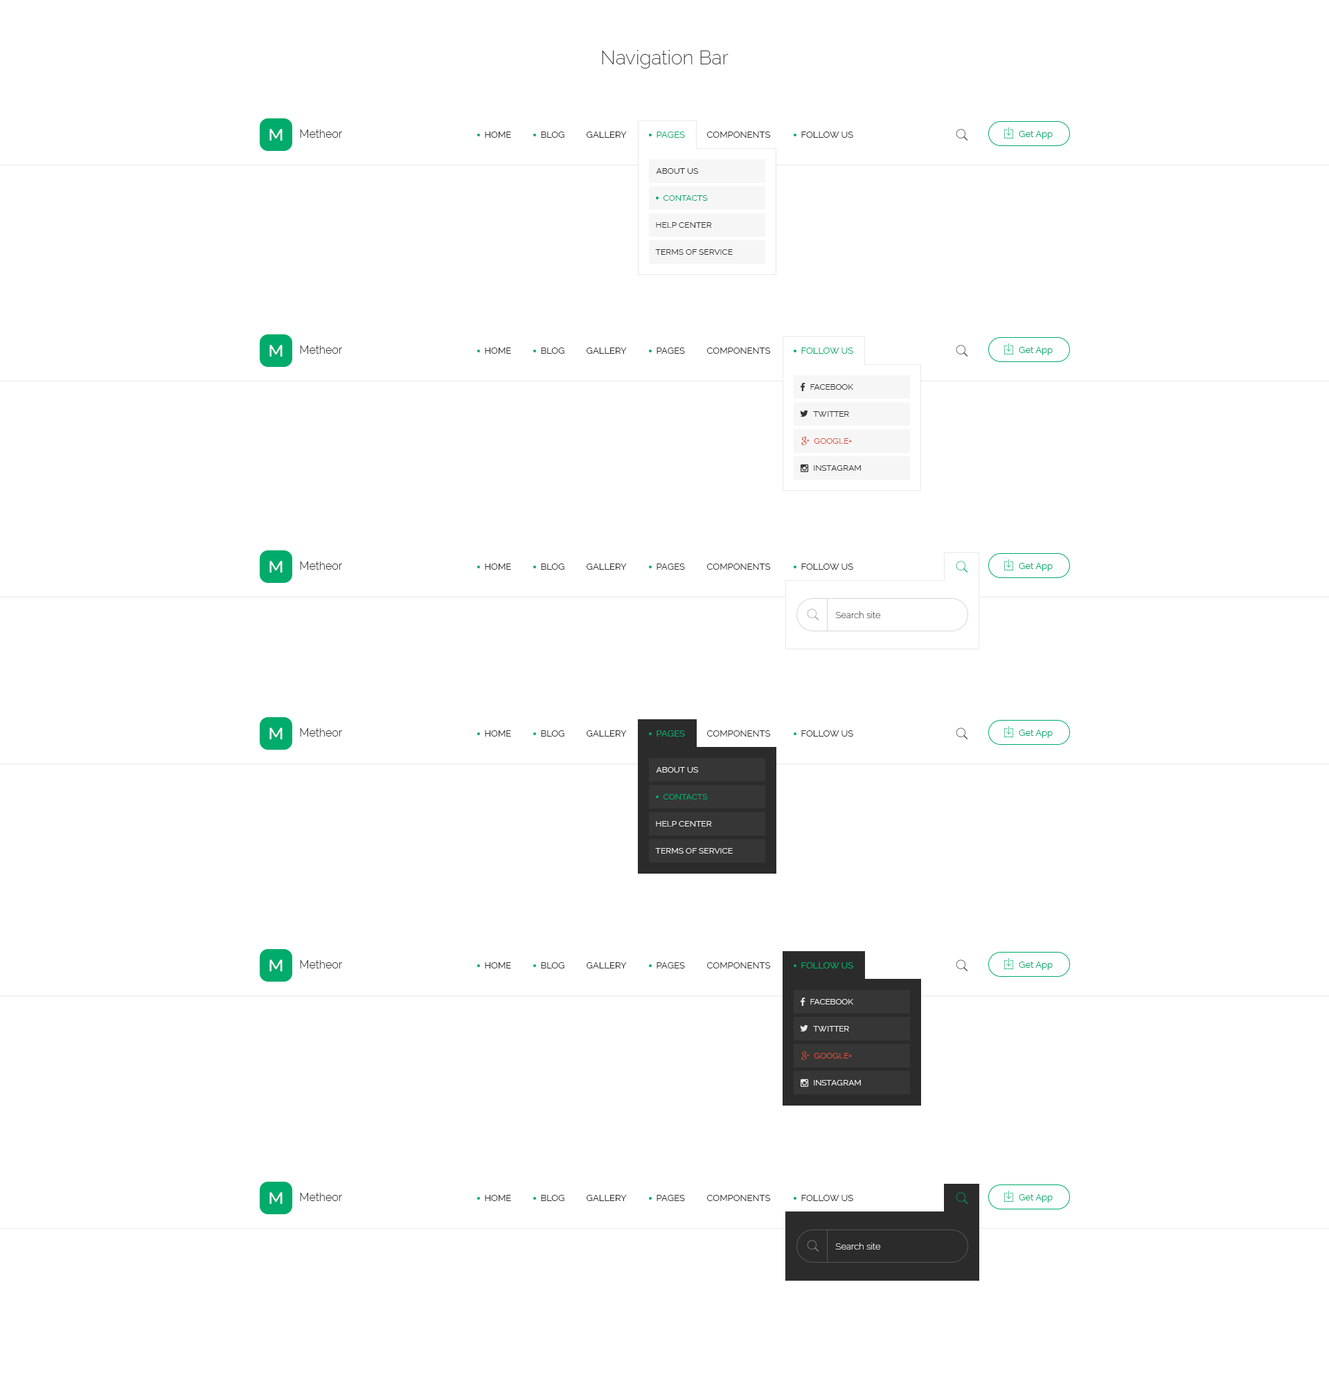
<style>
.page{position:relative;width:1329px;height:1379px;background:#ffffff}
.page>*{position:absolute;margin:0}
.t1{font:19.4px "Raleway-ExtraLight";color:#333333}
.t2{font:16.6px "Raleway-Medium";color:#ffffff}
.t3{font:11.1px "Raleway-Light";color:#333333}
.t4{font:9px "Raleway";color:#333333;text-transform:uppercase}
.t5{font:9px "Raleway";color:#00ab6b;text-transform:uppercase}
.t6{font:9px "Raleway";color:#00ab6b}
.t7{font:8.3px "Raleway";color:#333333;text-transform:uppercase}
.t8{font:8.3px "Raleway";color:#00ab6b;text-transform:uppercase}
.t9{font:8.3px "Raleway";color:#dd4b39;text-transform:uppercase}
.t10{font:9px "Raleway-ExtraLight";color:#333333}
.t11{font:8.3px "Raleway";color:#ffffff;text-transform:uppercase}
.t12{font:8.3px "Raleway";color:#fefefe;text-transform:uppercase}
.t13{font:9px "Raleway-ExtraLight";color:#ffffff}
</style>
<div class="page">
<p class="t1" style="left:602px;top:50px;width:126px;height:19px">Navigation Bar</p>
<p class="t2" style="left:269px;top:129px;width:13px;height:12px">M</p>
<p class="t3" style="left:300px;top:129px;width:42px;height:9px">Metheor</p>
<p class="t4" style="left:485px;top:132px;width:26px;height:6px">Home</p>
<p class="t4" style="left:541px;top:132px;width:23px;height:6px">Blog</p>
<p class="t4" style="left:586px;top:132px;width:41px;height:6px">Gallery</p>
<p class="t5" style="left:656px;top:132px;width:29px;height:6px">Pages</p>
<p class="t4" style="left:707px;top:132px;width:64px;height:6px">Components</p>
<p class="t4" style="left:801px;top:132px;width:52px;height:6px">Follow Us</p>
<p class="t6" style="left:1018px;top:131px;width:34px;height:8px">Get App</p>
<p class="t7" style="left:656px;top:168px;width:42px;height:6px">About Us</p>
<p class="t8" style="left:663px;top:195px;width:45px;height:6px">Contacts</p>
<p class="t7" style="left:656px;top:222px;width:56px;height:6px">Help Center</p>
<p class="t7" style="left:655px;top:249px;width:77px;height:6px">Terms Of Service</p>
<p class="t2" style="left:269px;top:345px;width:13px;height:12px">M</p>
<p class="t3" style="left:300px;top:345px;width:42px;height:9px">Metheor</p>
<p class="t4" style="left:485px;top:348px;width:26px;height:6px">Home</p>
<p class="t4" style="left:541px;top:348px;width:23px;height:6px">Blog</p>
<p class="t4" style="left:586px;top:348px;width:41px;height:6px">Gallery</p>
<p class="t4" style="left:656px;top:348px;width:29px;height:6px">Pages</p>
<p class="t4" style="left:707px;top:348px;width:64px;height:6px">Components</p>
<p class="t5" style="left:801px;top:348px;width:52px;height:6px">Follow Us</p>
<p class="t6" style="left:1018px;top:347px;width:34px;height:8px">Get App</p>
<p class="t7" style="left:810px;top:384px;width:44px;height:6px">Facebook</p>
<p class="t7" style="left:813px;top:411px;width:36px;height:6px">Twitter</p>
<p class="t9" style="left:813px;top:438px;width:39px;height:6px">Google+</p>
<p class="t7" style="left:813px;top:465px;width:48px;height:6px">Instagram</p>
<p class="t2" style="left:269px;top:561px;width:13px;height:12px">M</p>
<p class="t3" style="left:300px;top:561px;width:42px;height:9px">Metheor</p>
<p class="t4" style="left:485px;top:564px;width:26px;height:6px">Home</p>
<p class="t4" style="left:541px;top:564px;width:23px;height:6px">Blog</p>
<p class="t4" style="left:586px;top:564px;width:41px;height:6px">Gallery</p>
<p class="t4" style="left:656px;top:564px;width:29px;height:6px">Pages</p>
<p class="t4" style="left:707px;top:564px;width:64px;height:6px">Components</p>
<p class="t4" style="left:801px;top:564px;width:52px;height:6px">Follow Us</p>
<p class="t6" style="left:1018px;top:563px;width:34px;height:8px">Get App</p>
<p class="t10" style="left:835px;top:611px;width:46px;height:7px">Search site</p>
<p class="t2" style="left:269px;top:728px;width:13px;height:11px">M</p>
<p class="t3" style="left:300px;top:728px;width:42px;height:9px">Metheor</p>
<p class="t4" style="left:485px;top:730px;width:26px;height:7px">Home</p>
<p class="t4" style="left:541px;top:730px;width:23px;height:7px">Blog</p>
<p class="t4" style="left:586px;top:730px;width:41px;height:7px">Gallery</p>
<p class="t5" style="left:656px;top:730px;width:29px;height:7px">Pages</p>
<p class="t4" style="left:707px;top:730px;width:64px;height:7px">Components</p>
<p class="t4" style="left:801px;top:730px;width:52px;height:7px">Follow Us</p>
<p class="t6" style="left:1018px;top:730px;width:34px;height:8px">Get App</p>
<p class="t11" style="left:656px;top:767px;width:42px;height:6px;opacity:0.9">About Us</p>
<p class="t8" style="left:663px;top:794px;width:45px;height:6px">Contacts</p>
<p class="t12" style="left:656px;top:821px;width:56px;height:6px;opacity:0.9">Help Center</p>
<p class="t11" style="left:655px;top:848px;width:77px;height:6px;opacity:0.9">Terms Of Service</p>
<p class="t2" style="left:269px;top:960px;width:13px;height:11px">M</p>
<p class="t3" style="left:300px;top:960px;width:42px;height:9px">Metheor</p>
<p class="t4" style="left:485px;top:962px;width:26px;height:7px">Home</p>
<p class="t4" style="left:541px;top:962px;width:23px;height:7px">Blog</p>
<p class="t4" style="left:586px;top:962px;width:41px;height:7px">Gallery</p>
<p class="t4" style="left:656px;top:962px;width:29px;height:7px">Pages</p>
<p class="t4" style="left:707px;top:962px;width:64px;height:7px">Components</p>
<p class="t5" style="left:801px;top:962px;width:52px;height:7px">Follow Us</p>
<p class="t6" style="left:1018px;top:962px;width:34px;height:8px">Get App</p>
<p class="t11" style="left:810px;top:999px;width:44px;height:6px;opacity:0.9">Facebook</p>
<p class="t11" style="left:813px;top:1026px;width:36px;height:6px;opacity:0.9">Twitter</p>
<p class="t9" style="left:813px;top:1053px;width:39px;height:6px">Google+</p>
<p class="t11" style="left:813px;top:1080px;width:48px;height:6px;opacity:0.9">Instagram</p>
<p class="t2" style="left:269px;top:1192px;width:13px;height:12px">M</p>
<p class="t3" style="left:300px;top:1193px;width:42px;height:8px">Metheor</p>
<p class="t4" style="left:485px;top:1195px;width:26px;height:6px">Home</p>
<p class="t4" style="left:541px;top:1195px;width:23px;height:6px">Blog</p>
<p class="t4" style="left:586px;top:1195px;width:41px;height:6px">Gallery</p>
<p class="t4" style="left:656px;top:1195px;width:29px;height:6px">Pages</p>
<p class="t4" style="left:707px;top:1195px;width:64px;height:6px">Components</p>
<p class="t4" style="left:801px;top:1195px;width:52px;height:6px">Follow Us</p>
<p class="t6" style="left:1018px;top:1194px;width:34px;height:9px">Get App</p>
<p class="t13" style="left:835px;top:1243px;width:46px;height:7px">Search site</p>
</div>
